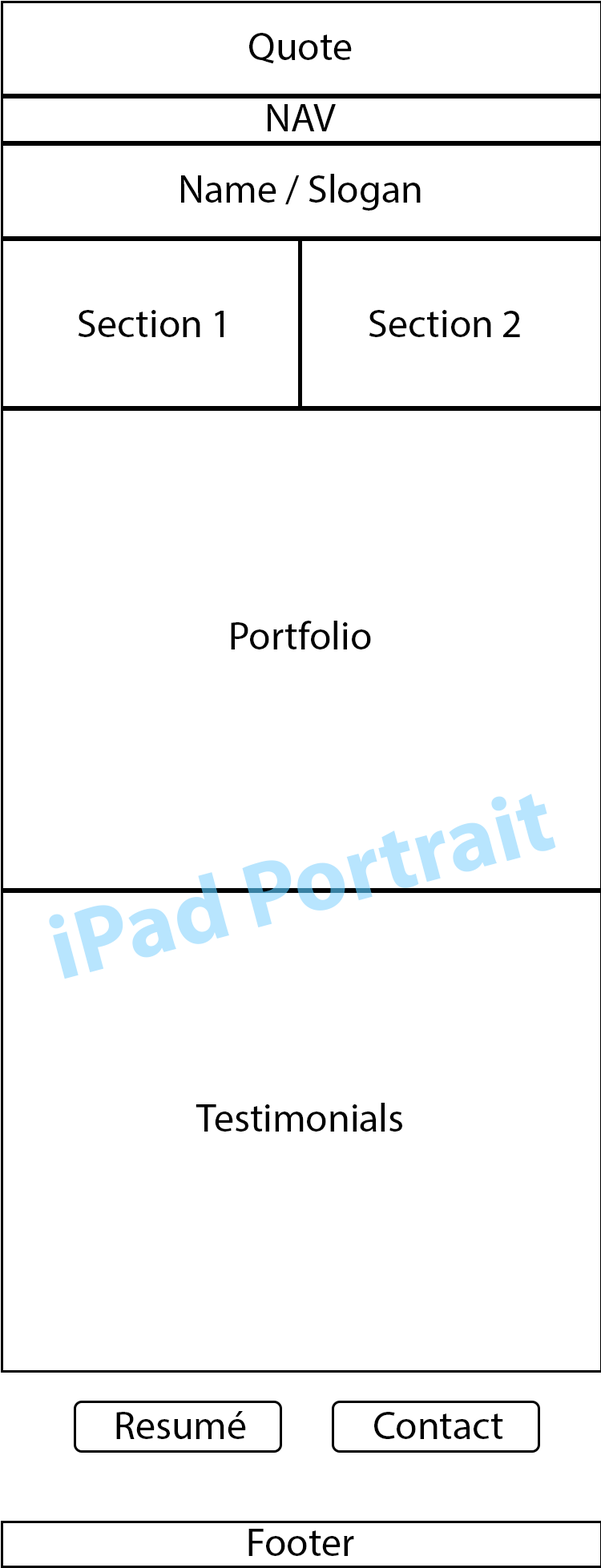
<style>
.page{position:relative;width:601px;height:1568px;background:#ffffff}
.page>*{position:absolute;margin:0}
.t1{font:40px "MyriadPro-Regular";color:#000000}
.t2{font:92.1px "MyriadPro-Bold";color:#b8e5fe}
</style>
<div class="page">
<p class="t1" style="left:249px;top:33px;width:103px;height:31px">Quote</p>
<p class="t1" style="left:267px;top:104px;width:69px;height:27px">NAV</p>
<p class="t1" style="left:181px;top:174px;width:239px;height:37px">Name / Slogan</p>
<p class="t1" style="left:78px;top:310px;width:145px;height:27px">Section 1</p>
<p class="t1" style="left:368px;top:310px;width:152px;height:27px">Section 2</p>
<p class="t1" style="left:231px;top:621px;width:140px;height:28px">Portfolio</p>
<p class="t2" style="left:49px;top:794px;width:507px;height:185px;rotate:-15deg">iPad Portrait</p>
<p class="t1" style="left:195px;top:1103px;width:207px;height:29px">Testimonials</p>
<p class="t1" style="left:116px;top:1411px;width:130px;height:28px">Resumé</p>
<p class="t1" style="left:374px;top:1412px;width:129px;height:27px">Contact</p>
<p class="t1" style="left:248px;top:1529px;width:106px;height:27px">Footer</p>
</div>
